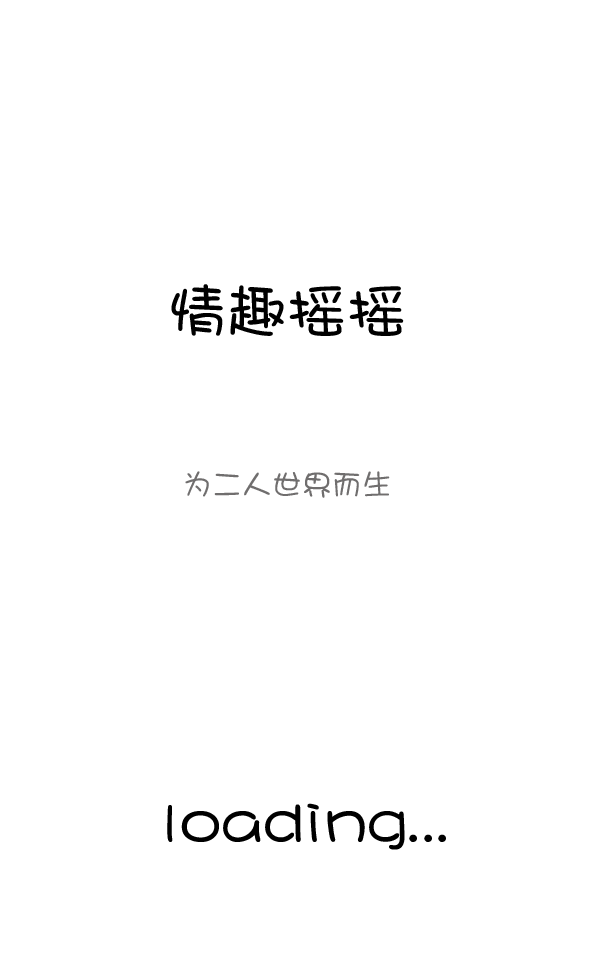
<style>
.page{position:relative;width:600px;height:960px;background:#ffffff}
.page>*{position:absolute;margin:0}
.t1{font:60px "DFPShaoNvW5";color:#000000}
.t2{font:30px "DFPShaoNvW5";color:#706e6e}
</style>
<div class="page">
<p class="t1" style="left:171px;top:284px;width:233px;height:52px">情趣摇摇</p>
<p class="t2" style="left:185px;top:471px;width:205px;height:27px">为二人世界而生</p>
<p class="t1" style="left:167px;top:803px;width:279px;height:47px">loading...</p>
</div>
